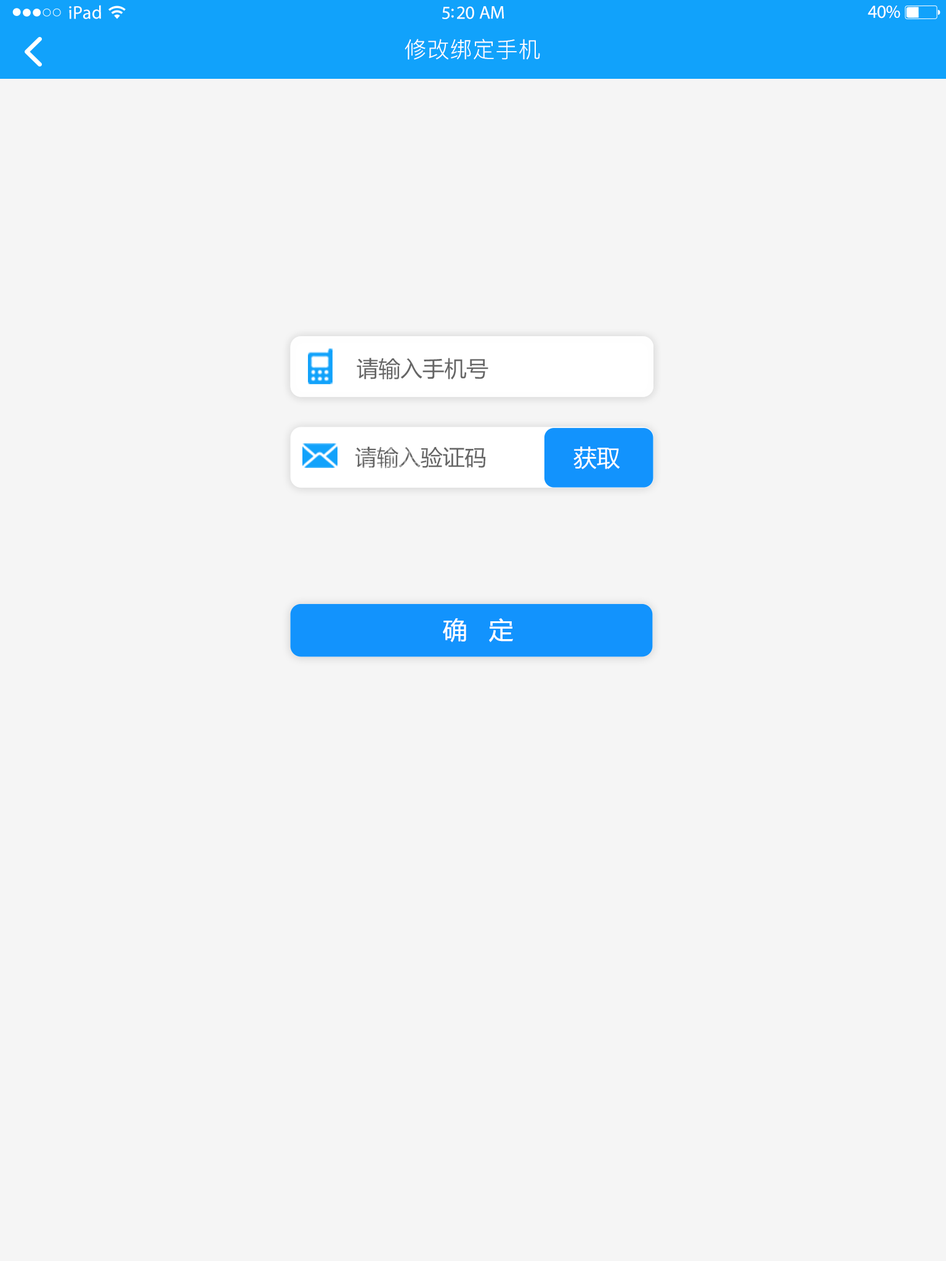
<style>
.page{position:relative;width:946px;height:1261px;background:#f5f5f5}
.page>*{position:absolute;margin:0}
.t1{font:18.5px "MyriadPro-Regular";letter-spacing:0.02em;color:#ffffff}
.t2{font:18.5px "MyriadPro-Regular";letter-spacing:-0.02em;color:#ffffff}
.t3{font:22.2px "PingFang-SC-Regular";letter-spacing:0.03em;color:#ffffff}
.t4{font:22px "MicrosoftYaHei";color:#666666}
.t5{font:23.2px "MicrosoftYaHei";color:#ffffff}
.t6{font:24.4px "MicrosoftYaHei";color:#ffffff}
</style>
<div class="page">
<p class="t1" style="left:69px;top:5px;width:32px;height:14px">iPad</p>
<p class="t2" style="left:867px;top:6px;width:33px;height:12px">40%</p>
<p class="t2" style="left:442px;top:6px;width:62px;height:13px">5:20 AM</p>
<p class="t3" style="left:405px;top:39px;width:135px;height:21px">修改绑定手机</p>
<p class="t4" style="left:356px;top:358px;width:132px;height:22px">请输入手机号</p>
<p class="t4" style="left:355px;top:446px;width:131px;height:23px">请输入验证码</p>
<p class="t5" style="left:573px;top:446px;width:47px;height:23px">获取</p>
<p class="t6" style="left:443px;top:618px;width:70px;height:24px">确   定</p>
</div>
